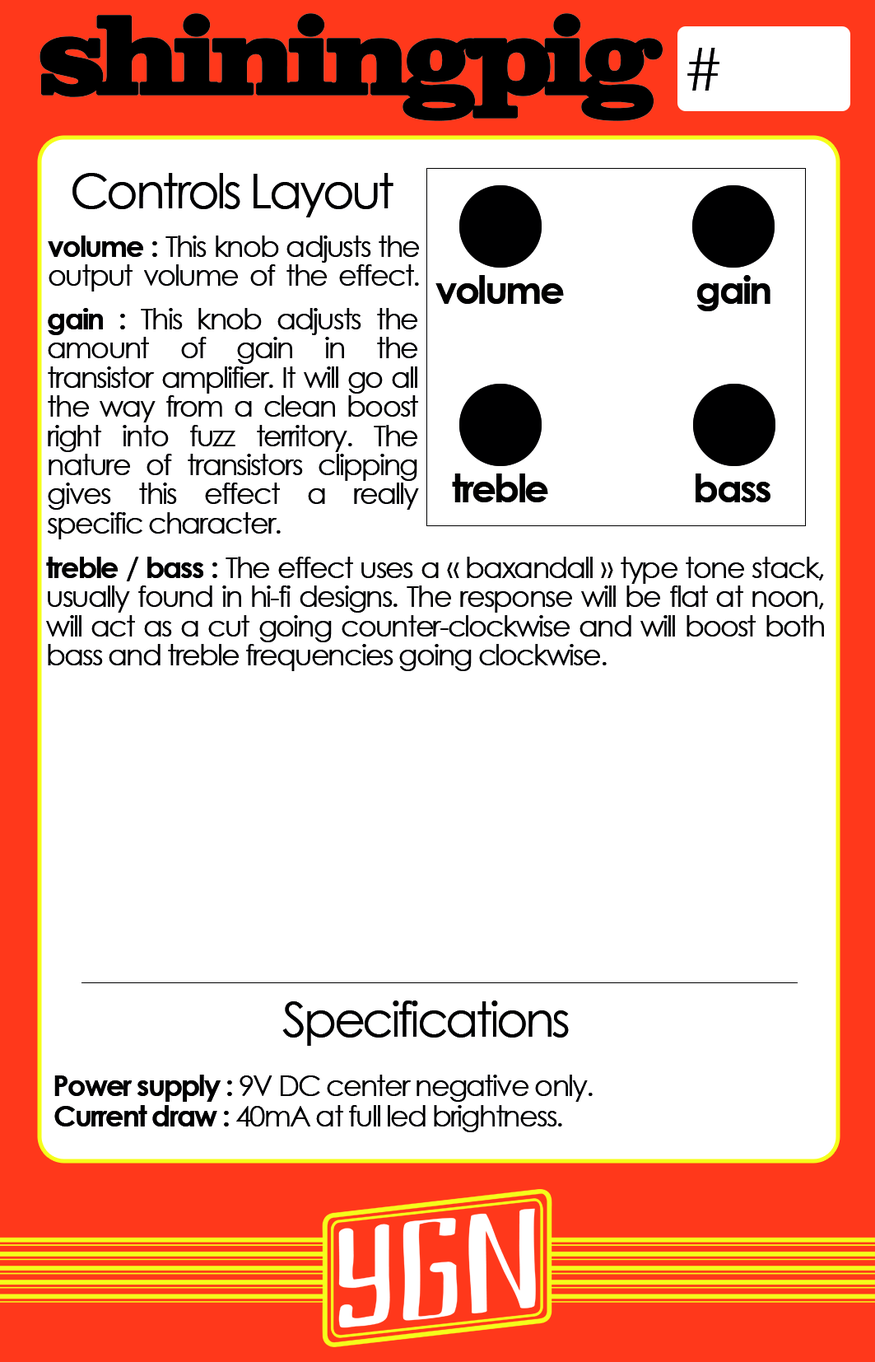
<style>
.page{position:relative;width:875px;height:1362px;background:#ffffff}
.page>*{position:absolute;margin:0}
.t1{font:107px "Clarendon-ExtraBold";letter-spacing:-0.08em;color:#000000;font-weight:bold}
.t2{font:58.4px "CenturyGothic";color:#000000}
.t3{font:48.6px "CenturyGothic";letter-spacing:-0.06em;color:#000000}
.t4{font:29.2px/29.2px "CenturyGothic";letter-spacing:-0.06em;color:#000000}
.t5{font:29.2px/29.2px "CenturyGothic-Bold";letter-spacing:-0.06em;color:#000000}
.t6{font:38.9px "CenturyGothic-Bold";letter-spacing:-0.06em;color:#000000}
.t7{font:29.2px "CenturyGothic";letter-spacing:-0.06em;color:#000000}
.t8{font:29.2px "CenturyGothic-Bold";letter-spacing:-0.06em;color:#000000}
</style>
<div class="page">
<p class="t1" style="left:40px;top:13px;width:623px;height:108px">shiningpig</p>
<p class="t2" style="left:688px;top:48px;width:32px;height:43px">#</p>
<p class="t3" style="left:72px;top:173px;width:322px;height:44px">Controls Layout</p>
<p class="t4" style="left:48px;top:236px;width:371px;height:56px;text-align:justify"><span class="t5">volume : </span>This knob adjusts the output volume of the effect.</p>
<p class="t6" style="left:436px;top:275px;width:128px;height:29px">volume</p>
<p class="t6" style="left:698px;top:275px;width:73px;height:36px">gain</p>
<p class="t4" style="left:47px;top:308px;width:372px;height:231px;text-align:justify"><span class="t5">gain : </span>This knob adjusts the amount of gain in the <br>transistor amplifier. It will go all the way from a clean boost right into fuzz territory. The nature of transistors clipping gives this effect a really <br>specific character.</p>
<p class="t6" style="left:452px;top:474px;width:96px;height:28px">treble</p>
<p class="t6" style="left:696px;top:474px;width:75px;height:28px">bass</p>
<p class="t4" style="left:46px;top:557px;width:778px;height:114px;text-align:justify"><span class="t5">treble / bass : </span>The effect uses a « baxandall » type tone stack,<br>usually found in hi-fi designs. The response will be flat at noon,<br>will act as a cut going counter-clockwise and will boost both<br>bass and treble frequencies going clockwise.</p>
<p class="t3" style="left:282px;top:1001px;width:287px;height:45px">Specifications</p>
<p class="t7" style="left:54px;top:1075px;width:539px;height:27px"><span class="t8">Power supply : </span>9V DC center negative only.</p>
<p class="t7" style="left:54px;top:1105px;width:508px;height:27px"><span class="t8">Current draw : </span>40mA at full led brightness.</p>
</div>
